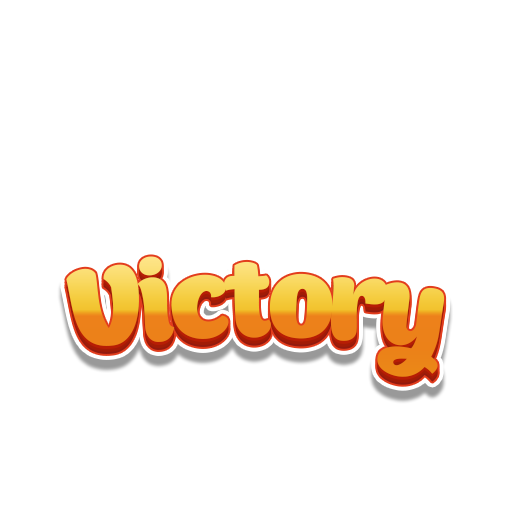
<style>
.page{position:relative;width:512px;height:512px;background:#ffffff}
.page>*{position:absolute;margin:0}
.t1{font:124.7px "Boomboom";letter-spacing:-0.04em}
</style>
<div class="page">
<p class="t1" style="left:66px;top:256px;width:379px;height:121px">Victory</p>
</div>
